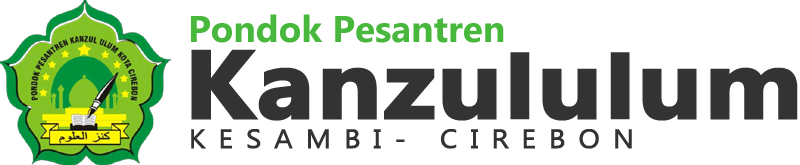
<style>
.page{position:relative;width:800px;height:165px;background:#ffffff}
.page>*{position:absolute;margin:0}
.t1{font:37px "Ebrima-Bold";color:#48b83c}
.t2{font:95.7px "Ebrima-Bold";color:#333333;font-weight:bold;scale:1.11 1}
.t3{font:95.7px "Ebrima-Bold";color:#333333;font-weight:bold;scale:1.13 1}
.t4{font:87.4px "Ebrima-Bold";color:#333333;font-weight:bold;scale:1.21 1}
.t5{font:26.6px "Ebrima";letter-spacing:0.36em;color:#333333;font-weight:bold;scale:1.05 1}
</style>
<div class="page">
<p class="t1" style="left:191px;top:14px;width:313px;height:29px">Pondok Pesantren</p>
<p class="t2" style="left:191px;top:49px;width:607px;height:72px"><span class="t3">K</span>anzu<span class="t4">l</span>u<span class="t4">l</span>um</p>
<p class="t5" style="left:191px;top:129px;width:441px;height:20px">KESAMBI- CIREBON</p>
</div>
